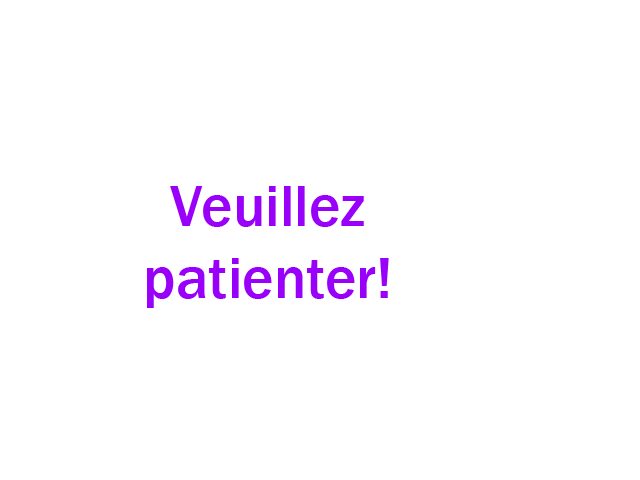
<style>
.page{position:relative;width:640px;height:480px;background:#ffffff}
.page>*{position:absolute;margin:0}
.t1{font:60px "FranklinGothic-Medium";color:#9800f9}
</style>
<div class="page">
<p class="t1" style="left:147px;top:186px;width:242px;height:122px;text-align:center">Veuillez<br>patienter!</p>
</div>
